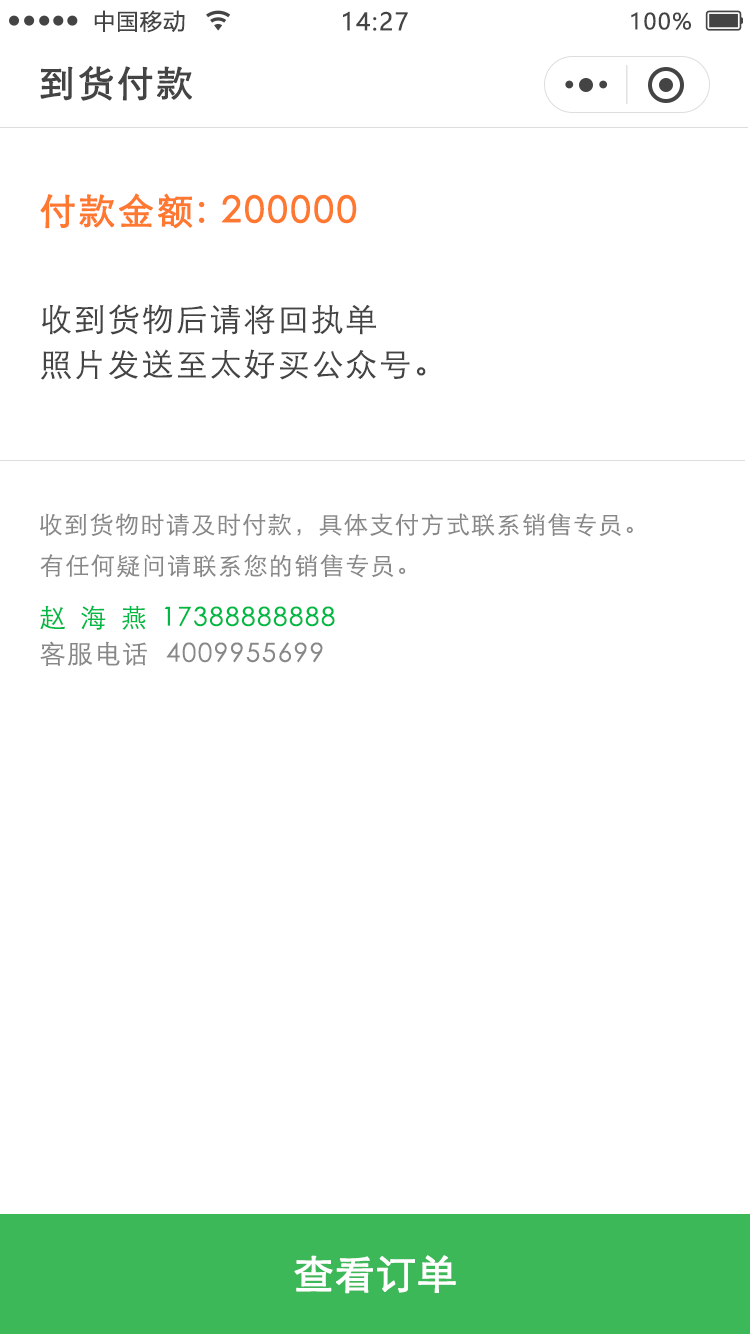
<style>
.page{position:relative;width:750px;height:1334px;background:#ffffff}
.page>*{position:absolute;margin:0}
.t1{font:22px "MicrosoftYaHei";letter-spacing:0.06em;color:#444444}
.t2{font:24px "MicrosoftYaHei";letter-spacing:0.06em;color:#444444}
.t3{font:36px "STXihei";letter-spacing:0.06em;color:#444444;font-weight:bold}
.t4{font:36px "STXihei";letter-spacing:0.06em;color:#ff782f;font-weight:bold}
.t5{font:32px/45px "STXihei";letter-spacing:0.06em;color:#444444}
.t6{font:24px "STXihei";letter-spacing:0.06em;color:#888888}
.t7{font:26px "STXihei";letter-spacing:0.06em;color:#00b945}
.t8{font:26px "STXihei";letter-spacing:0.56em;color:#00b945}
.t9{font:26px "STXihei";letter-spacing:0.06em;color:#888888}
.t10{font:40px "STXihei";color:#ffffff;font-weight:bold}
</style>
<div class="page">
<p class="t1" style="left:94px;top:10px;width:91px;height:23px">中国移动</p>
<p class="t2" style="left:343px;top:11px;width:65px;height:20px">14:27</p>
<p class="t1" style="left:631px;top:12px;width:60px;height:18px">100%</p>
<p class="t3" style="left:40px;top:66px;width:152px;height:35px">到货付款</p>
<p class="t4" style="left:40px;top:193px;width:317px;height:36px">付款金额: 200000</p>
<p class="t5" style="left:41px;top:304px;width:385px;height:76px">收到货物后请将回执单<br>照片发送至太好买公众号。</p>
<p class="t6" style="left:40px;top:513px;width:593px;height:24px">收到货物时请及时付款，具体支付方式联系销售专员。</p>
<p class="t6" style="left:40px;top:554px;width:366px;height:24px">有任何疑问请联系您的销售专员。</p>
<p class="t7" style="left:40px;top:605px;width:295px;height:25px"><span class="t8">赵海燕</span>17388888888</p>
<p class="t9" style="left:40px;top:641px;width:283px;height:25px">客服电话  4009955699</p>
<p class="t10" style="left:294px;top:1255px;width:162px;height:39px">查看订单</p>
</div>
